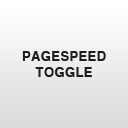
<style>
.page{position:relative;width:128px;height:128px}
.page>*{position:absolute;margin:0}
.t1{font:13px "Helvetica-Bold";letter-spacing:0.03em;color:#1e1e1e;text-transform:uppercase}
</style>
<div class="page">
<p class="t1" style="left:22px;top:51px;width:84px;height:26px;text-align:center">Pagespeed<br>Toggle</p>
</div>
